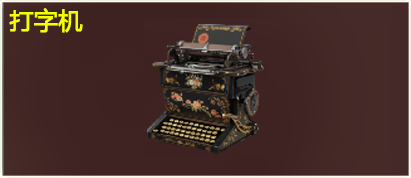
<style>
.page{position:relative;width:411px;height:178px}
.page>*{position:absolute;margin:0}
.t1{font:24px "MicrosoftYaHei";color:#f4ff00;font-weight:bold}
</style>
<div class="page">
<p class="t1" style="left:9px;top:8px;width:74px;height:25px">打字机</p>
</div>
